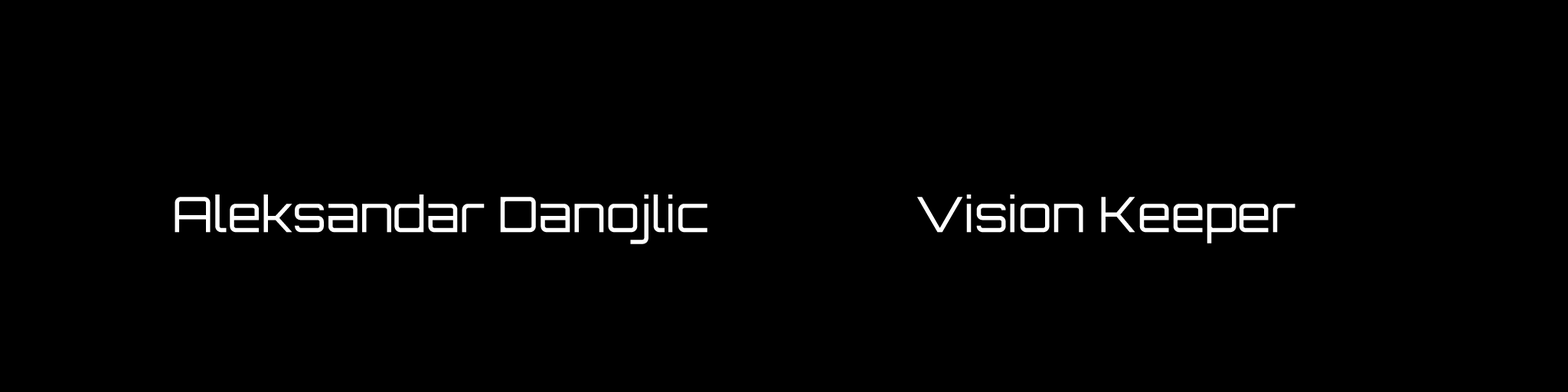
<style>
.page{position:relative;width:1568px;height:392px;background:#000000}
.page>*{position:absolute;margin:0}
.t1{font:48.6px "Orbitron-Light";color:#ffffff}
.t2{font:48.6px "Orbitron-Light";color:#000000}
</style>
<div class="page">
<p class="t1" style="left:175px;top:194px;width:1120px;height:50px"><span class="t2"><br><br></span>    Aleksandar Danojlic Vision Keeper</p>
</div>
